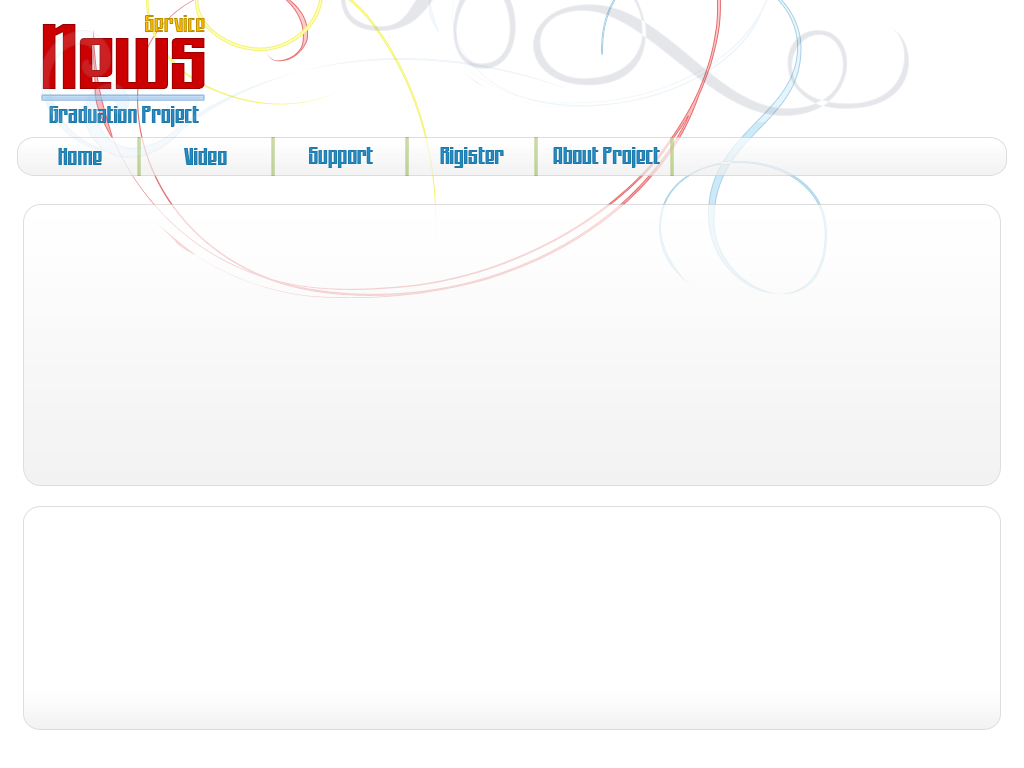
<style>
.page{position:relative;width:1024px;height:768px;background:#ffffff}
.page>*{position:absolute;margin:0}
.t1{font:24px "WorkingMan";color:#2081b4}
.t2{font:24px "WorkingMan";color:#2081b3}
.t3{font:24px "WorkingMan";color:#1f7eb1}
.t4{font:24px "WorkingMan";color:#2080b2}
</style>
<div class="page">
<p class="t1" style="left:58px;top:148px;width:44px;height:17px">Home</p>
<p class="t2" style="left:184px;top:148px;width:43px;height:17px">Video</p>
<p class="t1" style="left:309px;top:147px;width:64px;height:21px">Support</p>
<p class="t3" style="left:440px;top:147px;width:64px;height:21px">Rigister</p>
<p class="t4" style="left:553px;top:147px;width:107px;height:21px">About Project</p>
</div>
